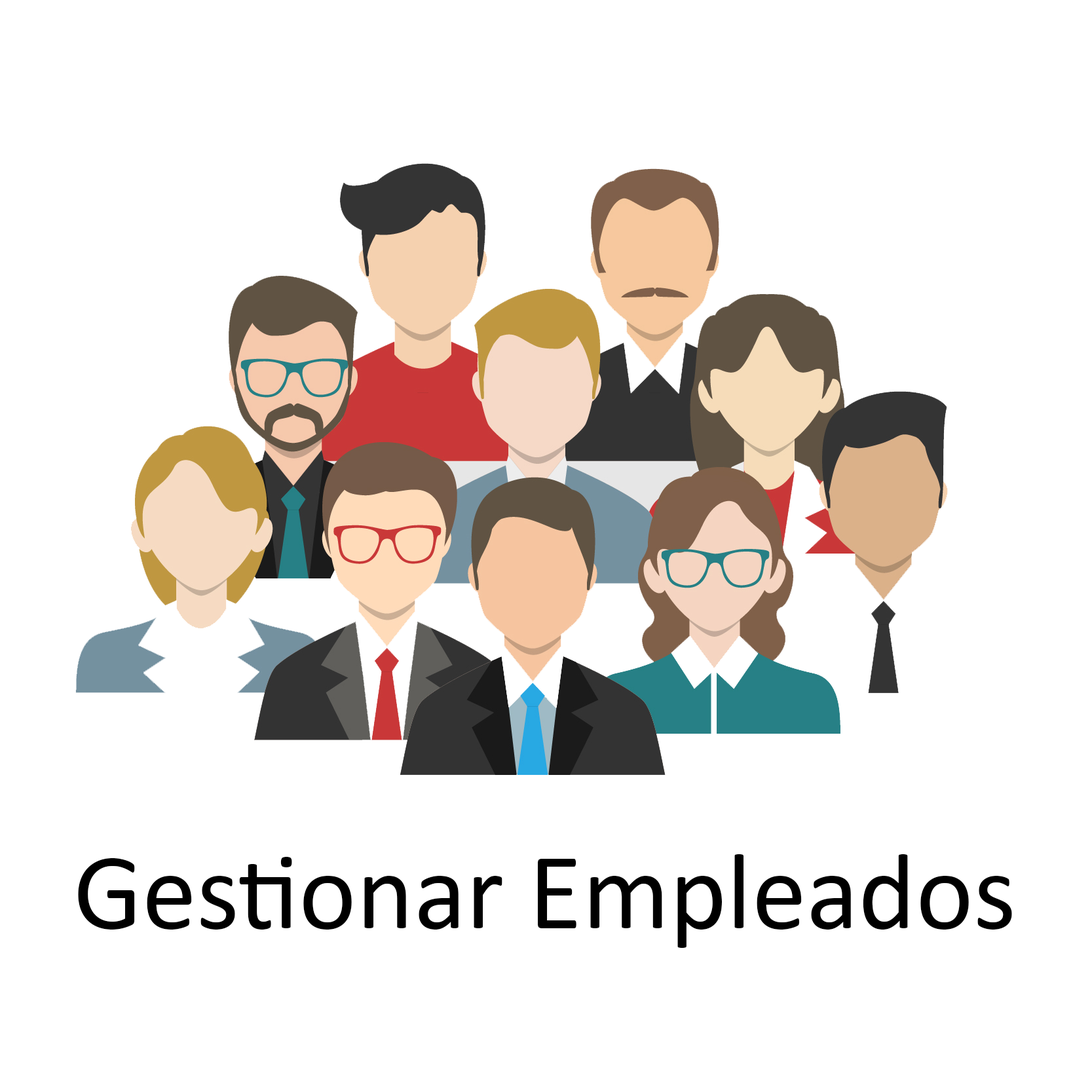
<style>
.page{position:relative;width:1092px;height:1092px;background:#ffffff}
.page>*{position:absolute;margin:0}
.t1{font:109.2px "Calibri";color:#000000}
</style>
<div class="page">
<p class="t1" style="left:78px;top:854px;width:934px;height:94px">Gestionar Empleados</p>
</div>
